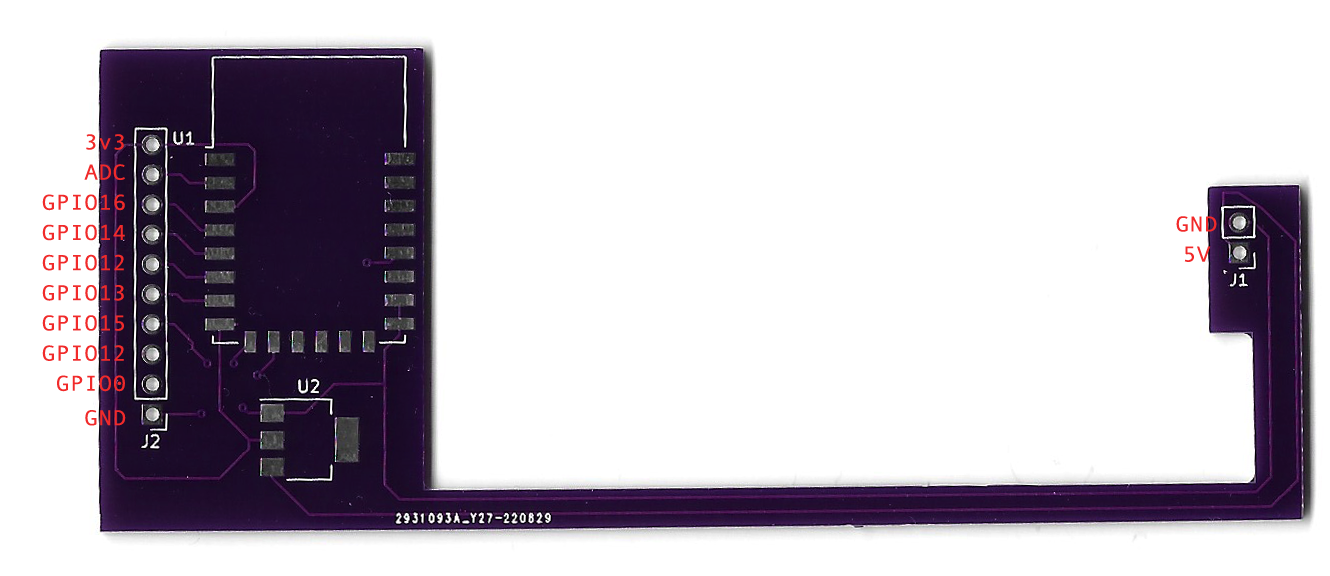
<style>
.page{position:relative;width:1330px;height:576px;background:#ffffff}
.page>*{position:absolute;margin:0}
.t1{font:21.5px/30.2px "AndaleMono";color:#f12a2a;scale:1.1 1}
.t2{font:21.5px/17.2px "AndaleMono";color:#f12a2a;scale:1.1 1}
</style>
<div class="page">
<p class="t1" style="left:42px;top:134px;width:84px;height:292px;text-align:right">3v3<br>ADC<br>GPIO16<br>GPIO14<br>GPIO12<br>GPIO13<br>GPIO15<br>GPIO12<br>GPIO0<br><span class="t2"><br>GND</span></p>
<p class="t1" style="left:1176px;top:216px;width:41px;height:46px;text-align:center">GND<br>5V</p>
</div>
